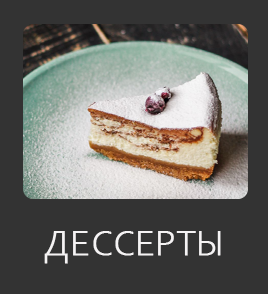
<style>
.page{position:relative;width:268px;height:294px;background:#333333}
.page>*{position:absolute;margin:0}
.t1{font:36px "CorbelLight";color:#f5f3f4;font-weight:bold}
</style>
<div class="page">
<p class="t1" style="left:44px;top:231px;width:177px;height:33px">ДЕССЕРТЫ</p>
</div>
